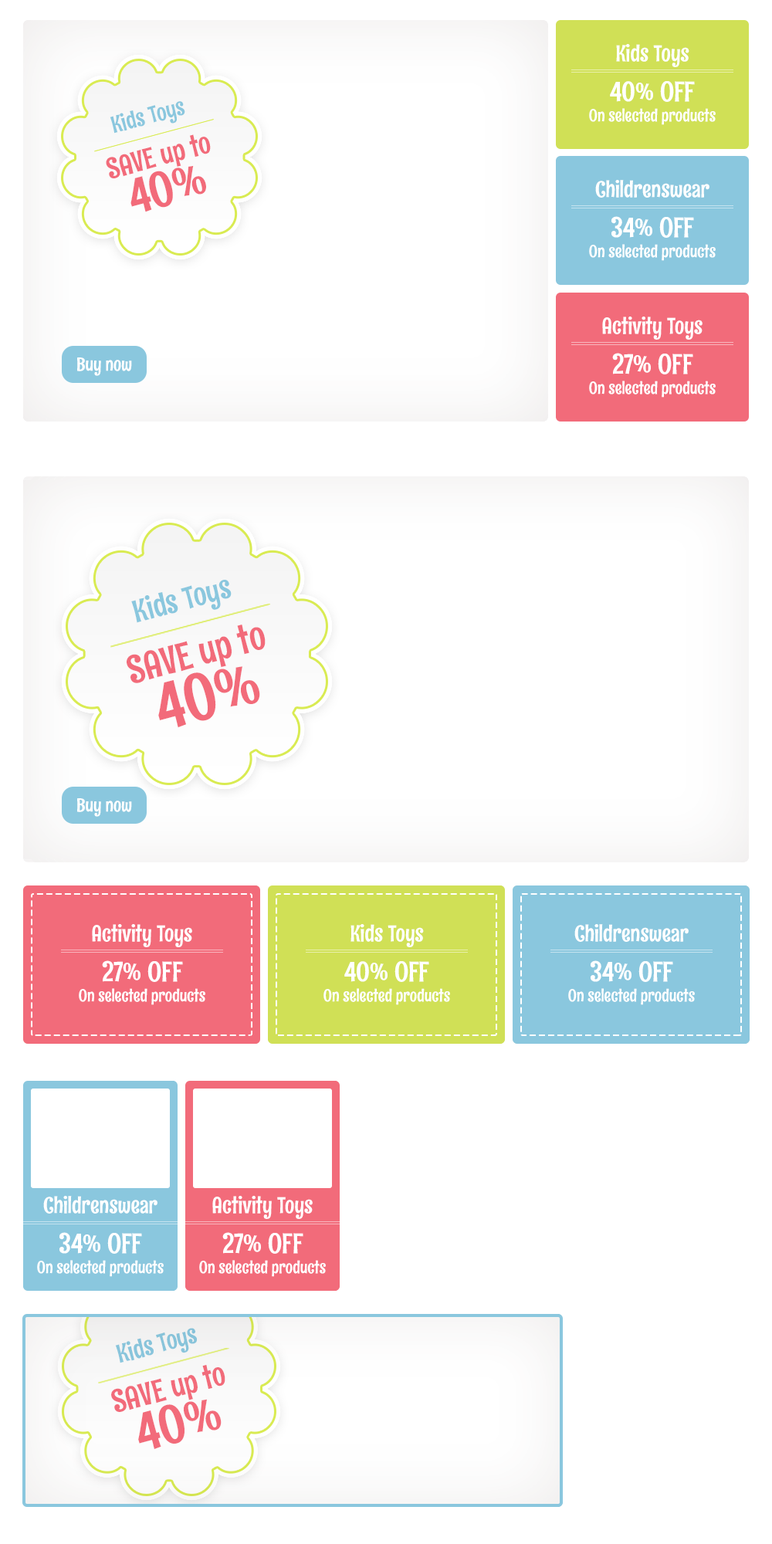
<style>
.page{position:relative;width:772px;height:1544px;background:#ffffff}
.page>*{position:absolute;margin:0}
.t1{font:17px "RumRaisin-Regular";color:#ffffff}
.t2{font:22.4px/1.5px "RumRaisin-Regular";color:#ffffff}
.t3{font:27.8px/40.2px "RumRaisin-Regular";color:#ffffff}
.t4{font:28.7px/43.5px "RumRaisin-Regular";color:#f26b7a}
.t5{font:22.8px/1.1px "RumRaisin-Regular";color:#8ac7de}
.t6{font:49.9px/40.4px "RumRaisin-Regular";color:#f26b7a}
.t7{font:18.5px "RumRaisin-Regular";color:#ffffff}
.t8{font:38.2px/58.1px "RumRaisin-Regular";color:#f26b7a}
.t9{font:30.5px/1.4px "RumRaisin-Regular";color:#8ac7de}
.t10{font:66.6px/53.8px "RumRaisin-Regular";color:#f26b7a}
</style>
<div class="page">
<p class="t1" style="left:589px;top:44px;width:127px;height:81px;text-align:center"><span class="t2">Kids Toys<br></span><span class="t3">40% OFF<br></span>On selected products</p>
<p class="t4" style="left:106px;top:101px;width:105px;height:111px;text-align:center;rotate:-15deg"><span class="t5">Kids Toys<br></span>SAVE up to<br><span class="t6">40%</span></p>
<p class="t1" style="left:589px;top:180px;width:127px;height:81px;text-align:center"><span class="t2">Childrenswear<br></span><span class="t3">34% OFF<br></span>On selected products</p>
<p class="t1" style="left:589px;top:317px;width:127px;height:81px;text-align:center"><span class="t2">Activity Toys<br></span><span class="t3">27% OFF<br></span>On selected products</p>
<p class="t7" style="left:77px;top:358px;width:55px;height:18px">Buy now</p>
<p class="t7" style="left:77px;top:358px;width:55px;height:18px">Buy now</p>
<p class="t8" style="left:127px;top:580px;width:139px;height:148px;text-align:center;rotate:-15deg"><span class="t9">Kids Toys<br></span>SAVE up to<br><span class="t10">40%</span></p>
<p class="t7" style="left:77px;top:798px;width:55px;height:19px">Buy now</p>
<p class="t1" style="left:79px;top:924px;width:126px;height:81px;text-align:center"><span class="t2">Activity Toys<br></span><span class="t3">27% OFF<br></span>On selected products</p>
<p class="t1" style="left:324px;top:924px;width:126px;height:81px;text-align:center"><span class="t2">Kids Toys<br></span><span class="t3">40% OFF<br></span>On selected products</p>
<p class="t1" style="left:568px;top:924px;width:127px;height:81px;text-align:center"><span class="t2">Childrenswear<br></span><span class="t3">34% OFF<br></span>On selected products</p>
<p class="t1" style="left:37px;top:1196px;width:127px;height:81px;text-align:center"><span class="t2">Childrenswear<br></span><span class="t3">34% OFF<br></span>On selected products</p>
<p class="t1" style="left:199px;top:1196px;width:127px;height:81px;text-align:center"><span class="t2">Activity Toys<br></span><span class="t3">27% OFF<br></span>On selected products</p>
</div>
